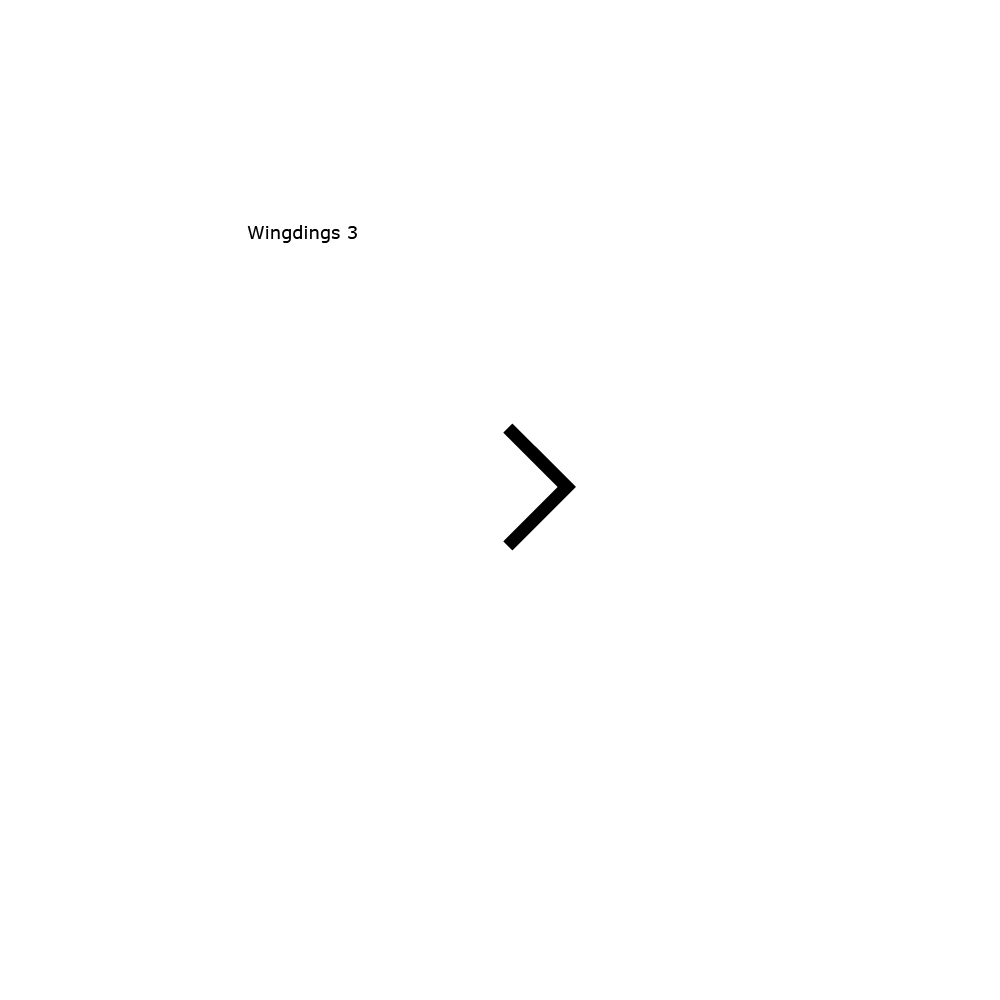
<style>
.page{position:relative;width:1000px;height:1000px;background:#ffffff}
.page>*{position:absolute;margin:0}
.t1{font:18px "Verdana";color:#000000}
</style>
<div class="page">
<p class="t1" style="left:247px;top:225px;width:110px;height:18px">Wingdings 3</p>
</div>
